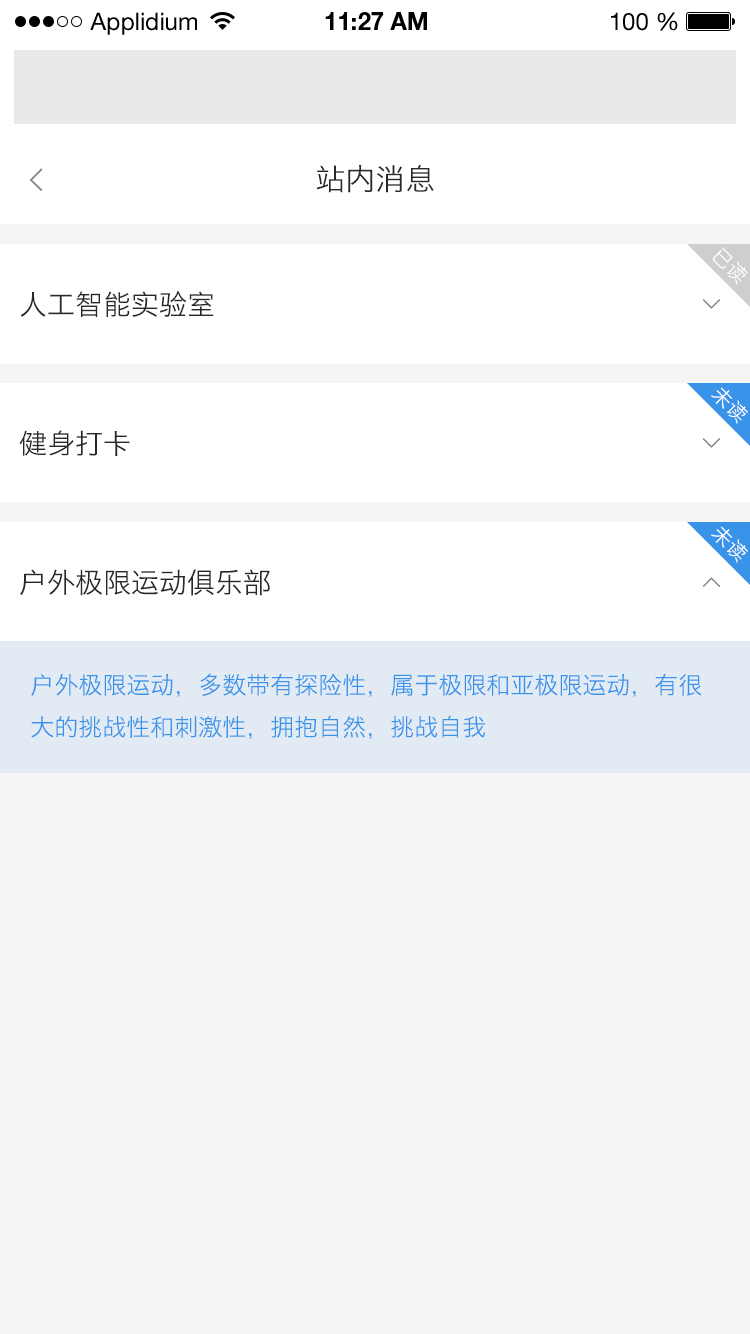
<style>
.page{position:relative;width:750px;height:1334px;background:#f5f5f5}
.page>*{position:absolute;margin:0}
.t1{font:24px "HelveticaNeueLTStd-Roman";color:#000000}
.t2{font:24px "HelveticaNeueLTStd-Bd";color:#000000}
.t3{font:30px "HiraginoSansGB-W3";color:#282828}
.t4{font:20px "HiraginoSansGB-W3";color:#ffffff}
.t5{font:28px "HiraginoSansGB-W3";color:#282828}
.t6{font:24px "HiraginoSansGB-W3";color:#3993e9}
</style>
<div class="page">
<p class="t1" style="left:90px;top:12px;width:107px;height:23px">Applidium</p>
<p class="t2" style="left:325px;top:12px;width:102px;height:18px">11:27 AM</p>
<p class="t1" style="left:611px;top:12px;width:67px;height:19px">100 %</p>
<p class="t3" style="left:316px;top:165px;width:118px;height:28px">站内消息</p>
<p class="t4" style="left:712px;top:247px;width:36px;height:38px;rotate:45deg">已读</p>
<p class="t5" style="left:20px;top:291px;width:194px;height:26px">人工智能实验室</p>
<p class="t4" style="left:711px;top:387px;width:37px;height:37px;rotate:45deg">未读</p>
<p class="t5" style="left:19px;top:430px;width:111px;height:26px">健身打卡</p>
<p class="t4" style="left:711px;top:526px;width:37px;height:37px;rotate:45deg">未读</p>
<p class="t5" style="left:20px;top:569px;width:250px;height:27px">户外极限运动俱乐部</p>
<p class="t6" style="left:31px;top:673px;width:671px;height:66px">户外极限运动，多数带有探险性，属于极限和亚极限运动，有很大的挑战性和刺激性，拥抱自然，挑战自我</p>
</div>
